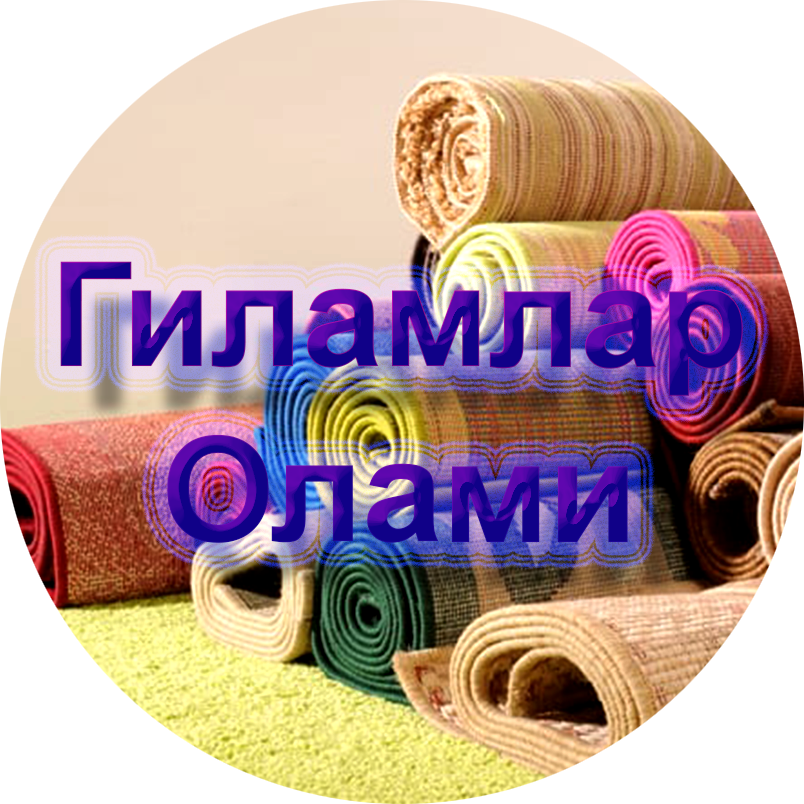
<style>
.page{position:relative;width:804px;height:804px;background:#ffffff}
.page>*{position:absolute;margin:0}
.t1{font:145.8px "Arial-BoldMT";letter-spacing:0.005em}
</style>
<div class="page">
<p class="t1" style="left:60px;top:261px;width:683px;height:282px;text-align:center">Гиламлар<br>Олами</p>
</div>
